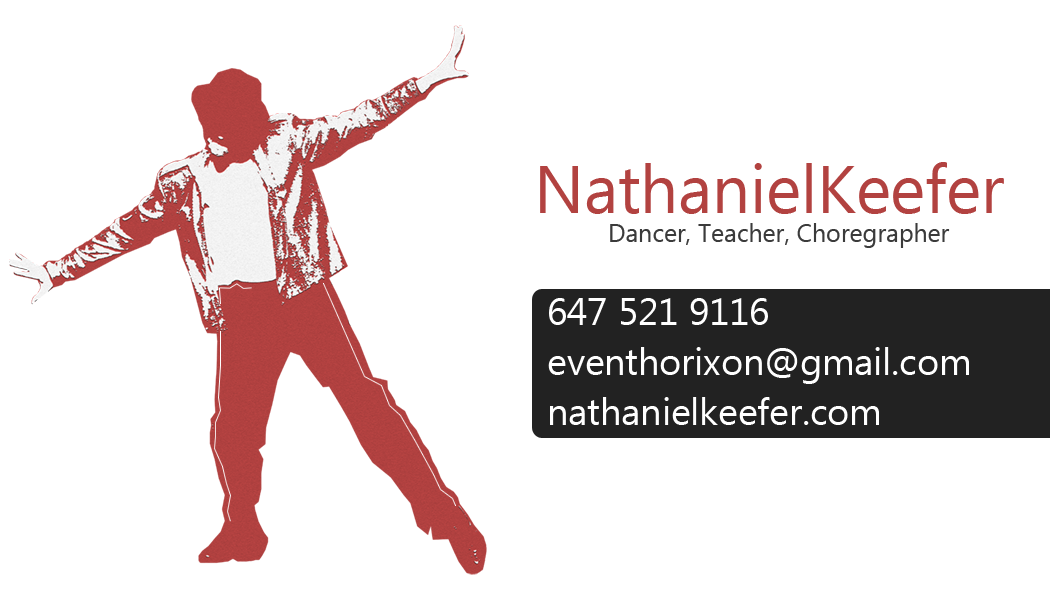
<style>
.page{position:relative;width:1050px;height:600px;background:#ffffff}
.page>*{position:absolute;margin:0}
.t1{font:66.7px "Ebrima";color:#b24240}
.t2{font:25px "Ebrima";color:#3b3b3b}
.t3{font:37.5px/50px "Ebrima";color:#ffffff}
</style>
<div class="page">
<p class="t1" style="left:540px;top:162px;width:464px;height:52px">NathanielKeefer</p>
<p class="t2" style="left:610px;top:223px;width:340px;height:25px">Dancer, Teacher, Choregrapher</p>
<p class="t3" style="left:548px;top:298px;width:421px;height:127px">647 521 9116<br>eventhorixon@gmail.com<br>nathanielkeefer.com</p>
</div>
